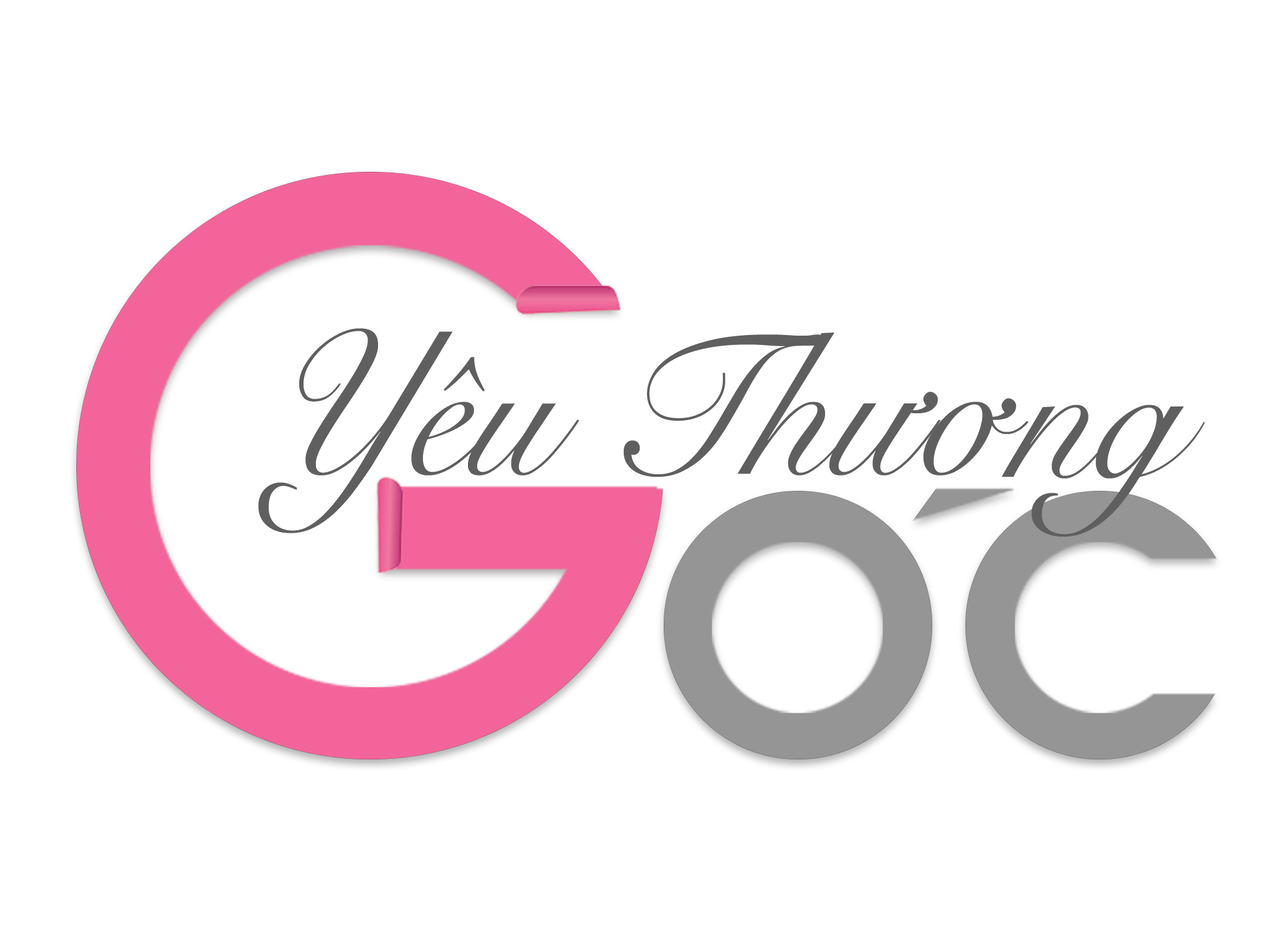
<style>
.page{position:relative;width:1261px;height:946px;background:#ffffff}
.page>*{position:absolute;margin:0}
.t1{font:203.8px "SnellRoundhand";color:#5f5f5f;scale:0.93 1}
</style>
<div class="page">
<p class="t1" style="left:258px;top:328px;width:683px;height:205px">Yêu Thư</p>
<p class="t1" style="left:923px;top:398px;width:106px;height:77px">ơ</p>
<p class="t1" style="left:1002px;top:405px;width:203px;height:132px">ng</p>
</div>
